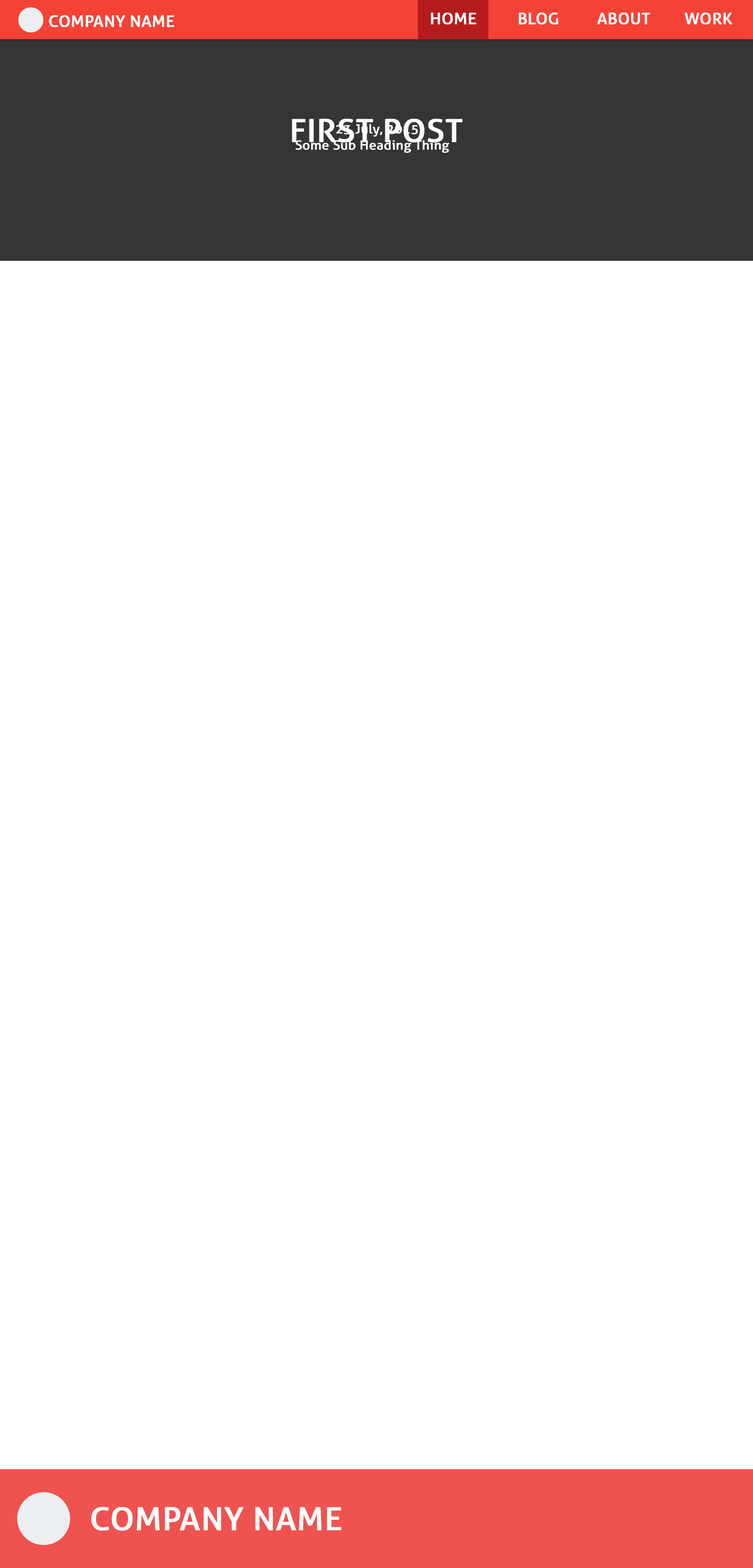
<style>
.page{position:relative;width:753px;height:1568px;background:#ffffff}
.page>*{position:absolute;margin:0}
.t1{font:15.7px "Aller";color:#ffffff;font-weight:bold;scale:1.04 1}
.t2{font:31.4px "Aller";color:#ffffff;font-weight:bold;scale:1.04 1}
.t3{font:12.5px "Aller";color:#ffffff;font-weight:bold;scale:1.04 1}
</style>
<div class="page">
<p class="t1" style="left:49px;top:15px;width:125px;height:12px">COMPANY NAME</p>
<p class="t1" style="left:431px;top:13px;width:45px;height:12px">HOME</p>
<p class="t1" style="left:518px;top:13px;width:40px;height:12px">BLOG</p>
<p class="t1" style="left:597px;top:13px;width:53px;height:12px">ABOUT</p>
<p class="t1" style="left:684px;top:13px;width:48px;height:12px">WORK</p>
<p class="t2" style="left:292px;top:119px;width:171px;height:24px">FIRST POST</p>
<p class="t3" style="left:336px;top:124px;width:82px;height:13px">23 July, 2015</p>
<p class="t3" style="left:295px;top:140px;width:154px;height:13px">Some Sub Heading Thing</p>
<p class="t2" style="left:91px;top:1507px;width:250px;height:24px">COMPANY NAME</p>
</div>
